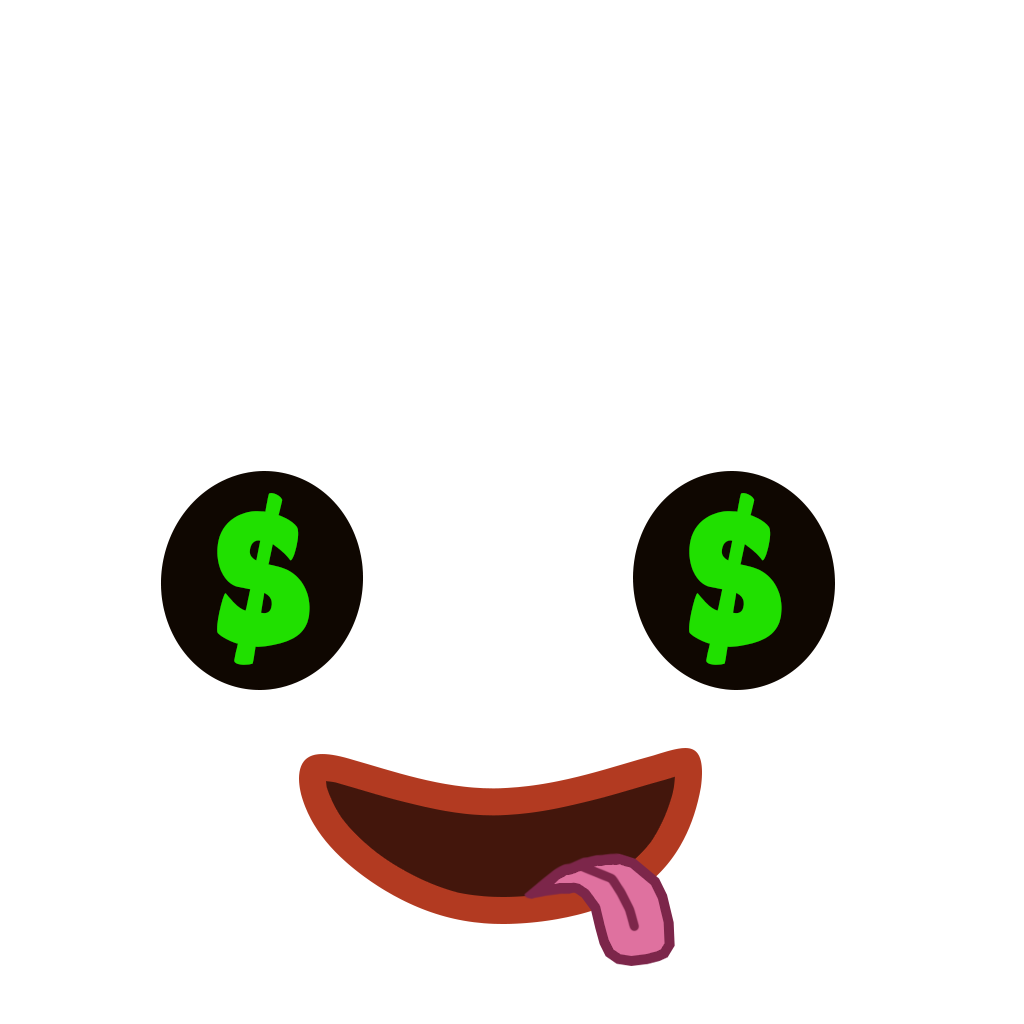
<style>
.page{position:relative;width:1024px;height:1024px;background:#ffffff}
.page>*{position:absolute;margin:0}
.t1{font:115.4px "Big_Bottom_Cartoon";letter-spacing:0.05em;color:#20e000}
</style>
<div class="page">
<p class="t1" style="left:217px;top:493px;width:93px;height:172px">$</p>
<p class="t1" style="left:689px;top:493px;width:93px;height:172px">$</p>
</div>
